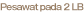
<style>
.page{position:relative;width:84px;height:15px;background:#ffffff}
.page>*{position:absolute;margin:0}
.t1{font:8.7px "GothicMB101Pro-DeBold";letter-spacing:-0.08em;color:#967c62}
</style>
<div class="page">
<p class="t1" style="left:0px;top:3px;width:84px;height:9px">Pesawat pada 2 LB</p>
</div>
